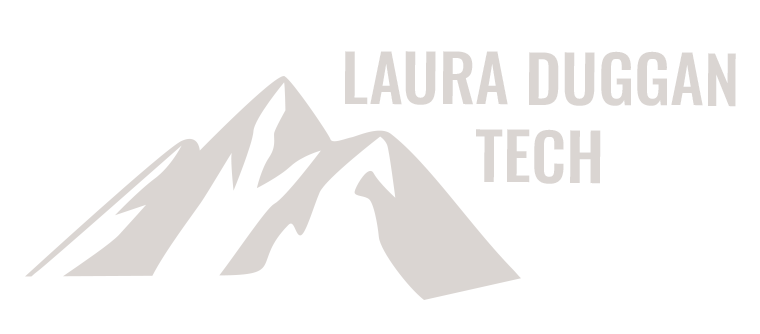
<style>
.page{position:relative;width:760px;height:334px;background:#ffffff}
.page>*{position:absolute;margin:0}
.t1{font:64.9px "Oswald-Medium";color:#dad5d2}
</style>
<div class="page">
<p class="t1" style="left:345px;top:51px;width:391px;height:133px;text-align:center">LAURA DUGGAN <br>TECH</p>
</div>
